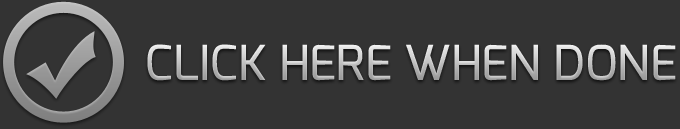
<style>
.page{position:relative;width:680px;height:129px;background:#333333}
.page>*{position:absolute;margin:0}
.t1{font:48px "Exo-Medium";text-transform:uppercase}
</style>
<div class="page">
<p class="t1" style="left:147px;top:44px;width:529px;height:37px">Click here when done</p>
</div>
